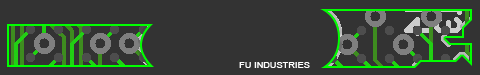
<style>
.page{position:relative;width:480px;height:75px;background:#333333}
.page>*{position:absolute;margin:0}
.t1{font:8px "ArialMT";color:#ffffff;font-weight:bold;scale:1.1 1}
</style>
<div class="page">
<p class="t1" style="left:239px;top:62px;width:71px;height:6px">FU INDUSTRIES</p>
</div>
